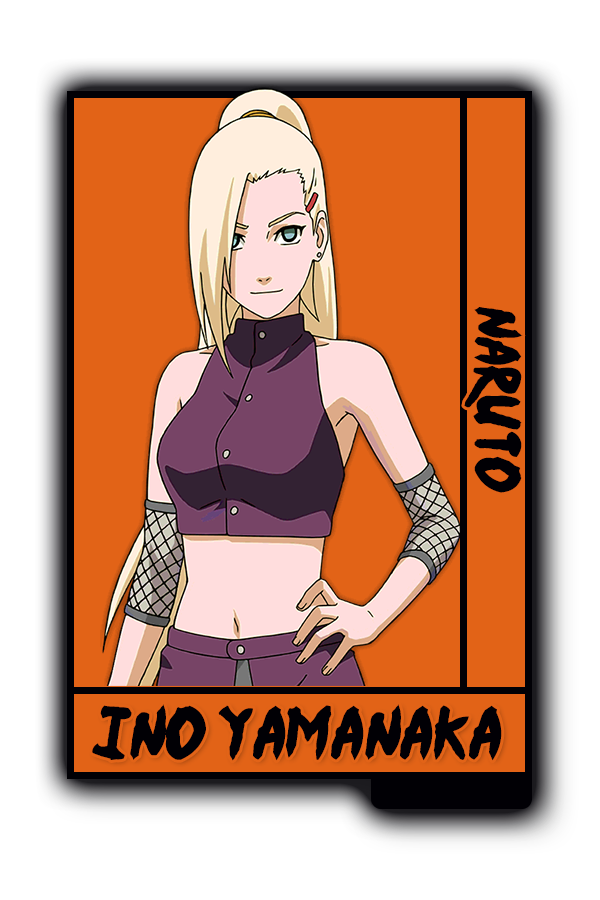
<style>
.page{position:relative;width:600px;height:900px;background:#e26317}
.page>*{position:absolute;margin:0}
.t1{font:52px "Ninja-Naruto";color:#010005}
.t2{font:60.3px "Ninja-Naruto";color:#010005}
</style>
<div class="page">
<p class="t1" style="left:464px;top:307px;width:59px;height:186px;rotate:90deg">Naruto</p>
<p class="t2" style="left:92px;top:704px;width:410px;height:57px">Ino Yamanaka</p>
</div>
